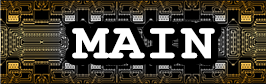
<style>
.page{position:relative;width:266px;height:84px;background:#000000}
.page>*{position:absolute;margin:0}
.t1{font:50px "CourierNewPS-BoldMT";letter-spacing:0.025em;color:#ffffff;font-weight:bold;scale:1.1 1}
</style>
<div class="page">
<p class="t1" style="left:72px;top:28px;width:143px;height:31px">MAIN</p>
</div>
